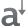
<style>
.page{position:relative;width:26px;height:26px;background:#ffffff}
.page>*{position:absolute;margin:0}
.t1{font:44px "EstrangeloEdessa";letter-spacing:-0.05em;color:#5c6065}
</style>
<div class="page">
<p class="t1" style="left:1px;top:7px;width:19px;height:20px">a</p>
</div>
